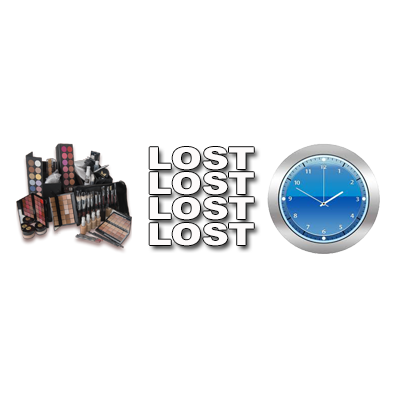
<style>
.page{position:relative;width:400px;height:400px;background:#ffffff}
.page>*{position:absolute;margin:0}
.t1{font:30.3px/25.2px "Arial-Black";color:#fdfbfb;scale:1.22 1}
</style>
<div class="page">
<p class="t1" style="left:149px;top:147px;width:105px;height:99px">LOST<br>LOST<br>LOST<br>LOST</p>
</div>
